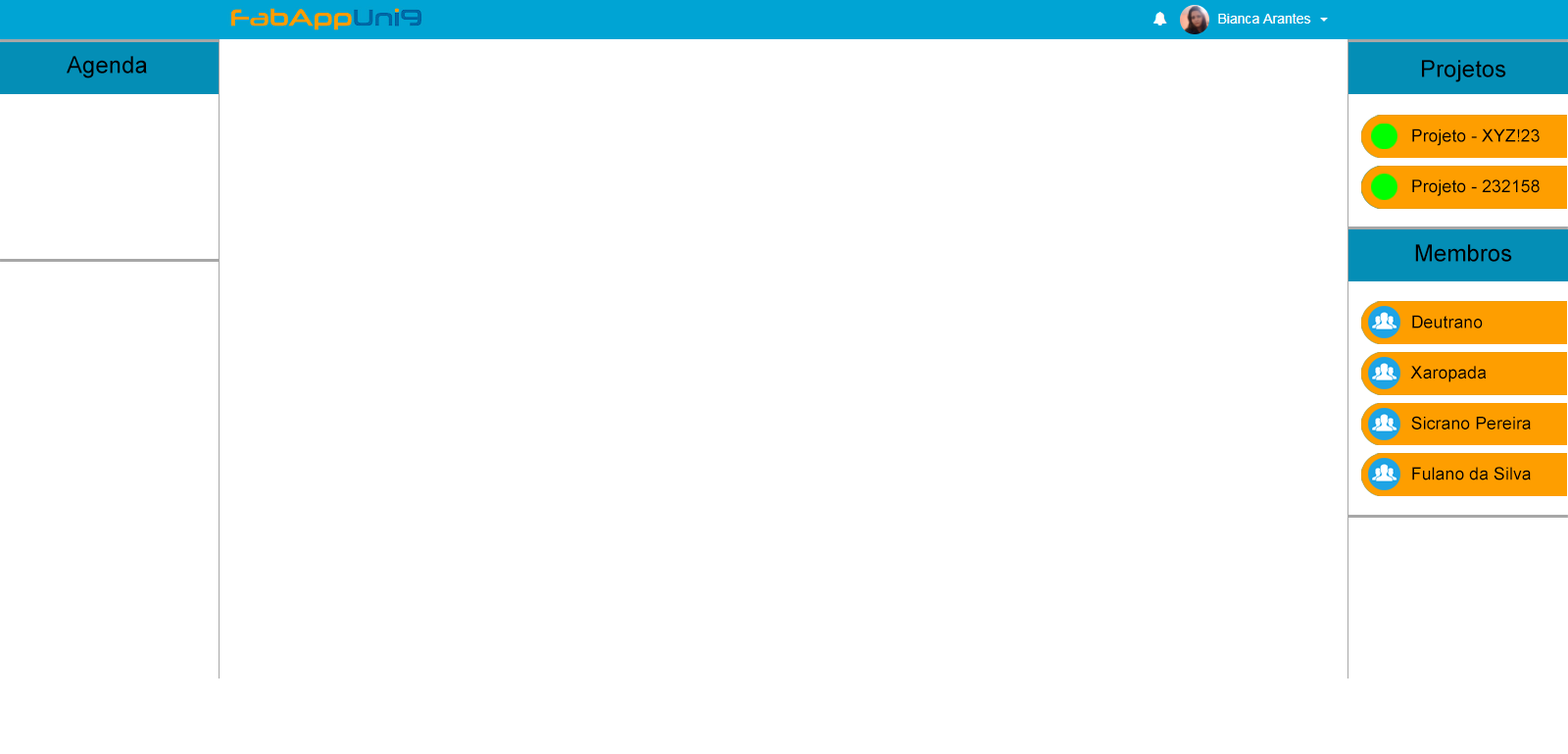
<style>
.page{position:relative;width:1568px;height:754px;background:#ffffff}
.page>*{position:absolute;margin:0}
.t1{font:23.5px "ArialMT";color:#000000}
.t2{font:17.5px "ArialMT";color:#000000}
</style>
<div class="page">
<p class="t1" style="left:67px;top:56px;width:80px;height:22px">Agenda</p>
<p class="t1" style="left:1422px;top:60px;width:84px;height:22px">Projetos</p>
<p class="t2" style="left:1412px;top:128px;width:128px;height:18px">Projeto - XYZ!23</p>
<p class="t2" style="left:1412px;top:179px;width:128px;height:17px">Projeto - 232158</p>
<p class="t1" style="left:1415px;top:244px;width:97px;height:18px">Membros</p>
<p class="t2" style="left:1412px;top:315px;width:71px;height:13px">Deutrano</p>
<p class="t2" style="left:1410px;top:366px;width:77px;height:16px">Xaropada</p>
<p class="t2" style="left:1411px;top:416px;width:120px;height:13px">Sicrano Pereira</p>
<p class="t2" style="left:1412px;top:466px;width:119px;height:14px">Fulano da Silva</p>
</div>
